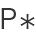
<style>
.page{position:relative;width:36px;height:36px;background:#ffffff}
.page>*{position:absolute;margin:0}
.t1{font:33.3px "AnonymousPro";color:#333333}
</style>
<div class="page">
<p class="t1" style="left:1px;top:8px;width:34px;height:21px">P*</p>
</div>
